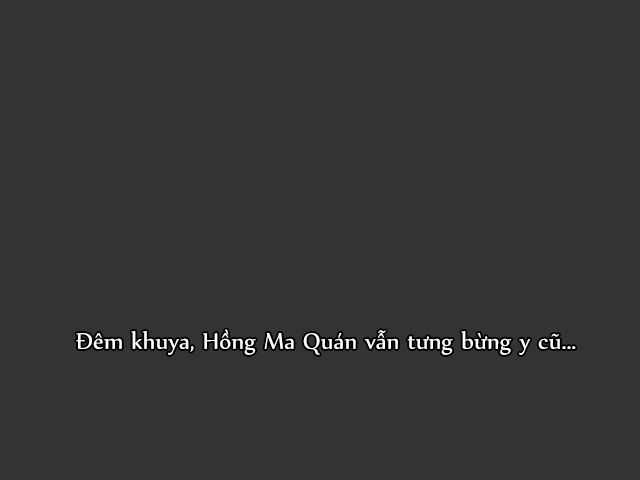
<style>
.page{position:relative;width:640px;height:480px;background:#333333}
.page>*{position:absolute;margin:0}
.t1{font:27px "UTM-Nyala";color:#ffffff}
</style>
<div class="page">
<p class="t1" style="left:76px;top:329px;width:500px;height:26px">Đêm khuya, Hồng Ma Quán vẫn tưng bừng y cũ...</p>
</div>
